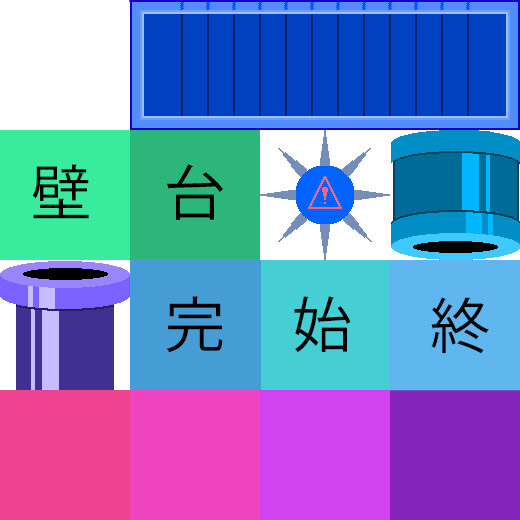
<style>
.page{position:relative;width:520px;height:520px}
.page>*{position:absolute;margin:0}
.t1{font:60px "KozGoPr6N-Regular";color:#000000}
</style>
<div class="page">
<p class="t1" style="left:32px;top:164px;width:57px;height:55px">壁</p>
<p class="t1" style="left:167px;top:164px;width:56px;height:56px">台</p>
<p class="t1" style="left:166px;top:296px;width:57px;height:57px">完</p>
<p class="t1" style="left:294px;top:296px;width:57px;height:57px">始</p>
<p class="t1" style="left:431px;top:297px;width:58px;height:57px">終</p>
</div>
